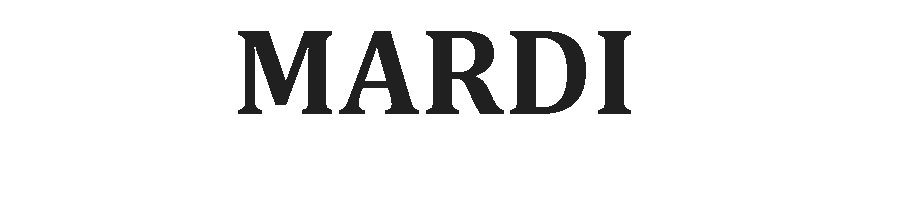
<style>
.page{position:relative;width:909px;height:222px;background:#ffffff}
.page>*{position:absolute;margin:0}
.t1{font:125px "Cambria-Bold";letter-spacing:0.005em;color:#202020}
</style>
<div class="page">
<p class="t1" style="left:238px;top:31px;width:393px;height:83px">MARDI</p>
</div>
